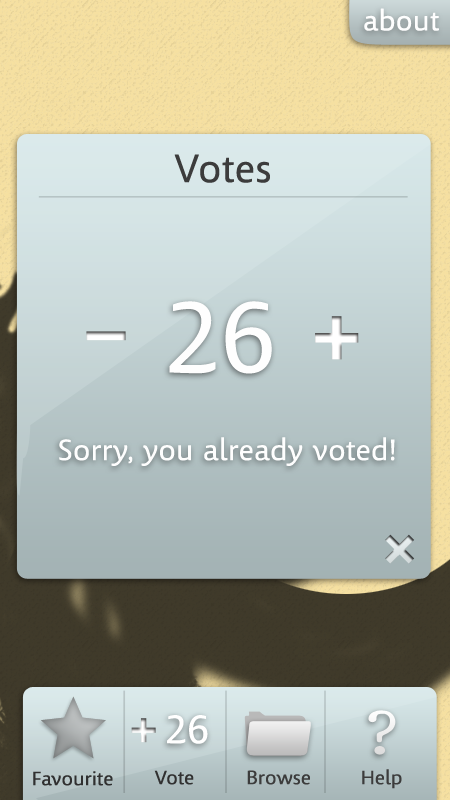
<style>
.page{position:relative;width:450px;height:800px}
.page>*{position:absolute;margin:0}
.t1{font:28px "Kootenay";color:#fefefe;font-weight:bold}
.t2{font:39px "Kootenay";letter-spacing:-0.005em;color:#3c3c3c;font-weight:bold}
.t3{font:99px "Kootenay";letter-spacing:-0.005em;color:#fefefe;font-weight:bold}
.t4{font:29px "Kootenay";letter-spacing:-0.005em;color:#fefefe;font-weight:bold}
.t5{font:39px "Kootenay";letter-spacing:-0.005em;color:#fefefe;font-weight:bold}
.t6{font:19px "Kootenay";letter-spacing:-0.005em;color:#303030;font-weight:bold}
.t7{font:19px "Kootenay";letter-spacing:-0.005em;color:#323232;font-weight:bold}
.t8{font:19px "Kootenay";letter-spacing:-0.005em;color:#3c3c3c;font-weight:bold}
</style>
<div class="page">
<p class="t1" style="left:364px;top:8px;width:75px;height:23px">about</p>
<p class="t2" style="left:174px;top:154px;width:96px;height:29px">Votes</p>
<p class="t3" style="left:169px;top:301px;width:103px;height:73px">26</p>
<p class="t4" style="left:59px;top:437px;width:336px;height:29px">Sorry, you already voted!</p>
<p class="t5" style="left:167px;top:715px;width:41px;height:29px">26</p>
<p class="t6" style="left:33px;top:771px;width:80px;height:15px">Favourite</p>
<p class="t7" style="left:154px;top:770px;width:40px;height:15px">Vote</p>
<p class="t8" style="left:247px;top:770px;width:63px;height:15px">Browse</p>
<p class="t8" style="left:362px;top:769px;width:40px;height:20px">Help</p>
</div>
